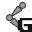
<style>
.page{position:relative;width:32px;height:32px;background:#ffffff}
.page>*{position:absolute;margin:0}
.t1{font:16px "PublicPixel";color:#141414;font-weight:bold}
</style>
<div class="page">
<p class="t1" style="left:17px;top:18px;width:16px;height:15px">G</p>
</div>
